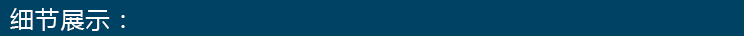
<style>
.page{position:relative;width:744px;height:36px;background:#004263}
.page>*{position:absolute;margin:0}
.t1{font:24px "MicrosoftYaHei";letter-spacing:0.05em;color:#ffffff}
</style>
<div class="page">
<p class="t1" style="left:10px;top:8px;width:115px;height:23px">细节展示：</p>
</div>
